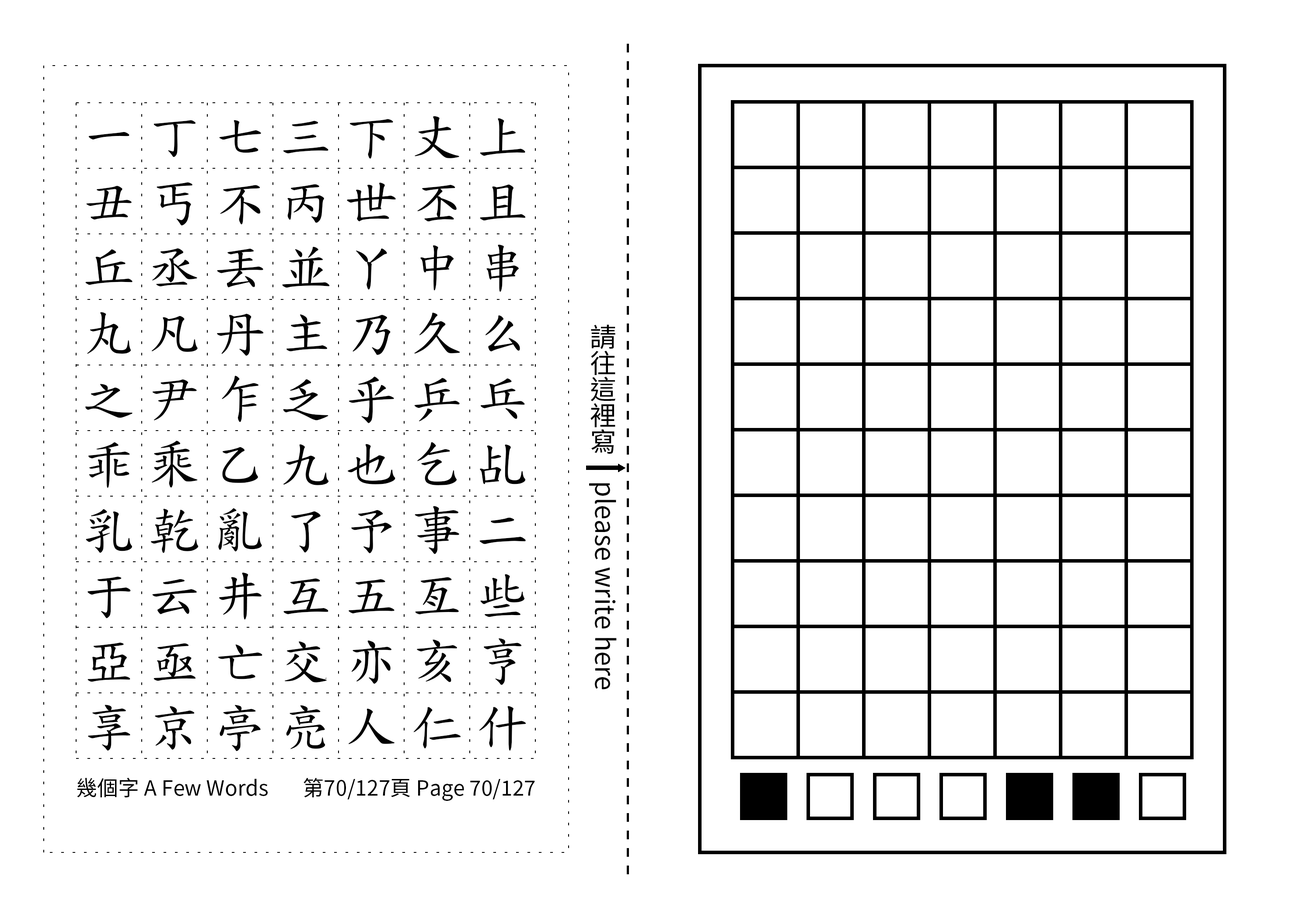
<style>
.page{position:relative;width:1299px;height:918px;background:#ffffff}
.page>*{position:absolute;margin:0}
.t1{font:52.5px/65.6px "TW-Kai-98_1";letter-spacing:0.25em;color:#000000}
.t2{font:26.2px "SourceHanSansTC-Regular";color:#000000}
.t3{font:21px "SourceHanSansTC-Regular";color:#000000}
</style>
<div class="page">
<p class="t1" style="left:85px;top:116px;width:441px;height:636px;text-align:center">一丁七三下丈上丑丐不丙世丕且丘丞丟並丫中串丸凡丹主乃久么之尹乍乏乎乒乓乖乘乙九也乞乩乳乾亂了予事二于云井互五亙些亞亟亡交亦亥亨享京亭亮人仁什</p>
<p class="t2" style="left:589px;top:324px;width:28px;height:366px;text-align:center">請往這裡寫　please write here</p>
<p class="t3" style="left:77px;top:778px;width:191px;height:20px">幾個字 A Few Words</p>
<p class="t3" style="left:303px;top:778px;width:232px;height:23px">第70/127頁 Page 70/127</p>
</div>
